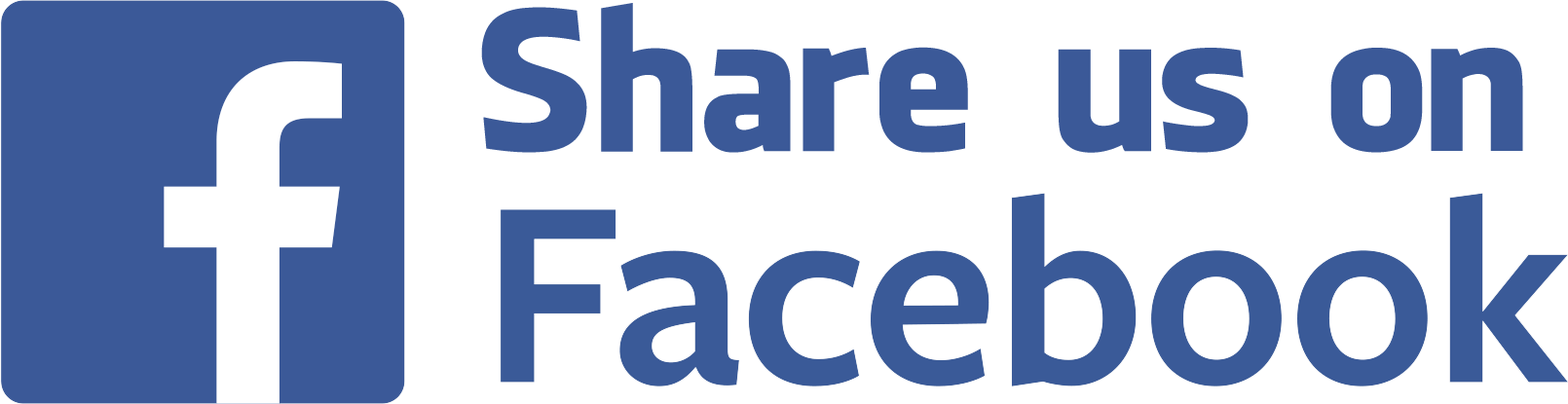
<style>
.page{position:relative;width:1568px;height:404px;background:#ffffff}
.page>*{position:absolute;margin:0}
.t1{font:190.7px "FacebookLetterFaces-Regular";color:#3b5998}
</style>
<div class="page">
<p class="t1" style="left:481px;top:3px;width:1042px;height:150px">Share us on</p>
</div>
